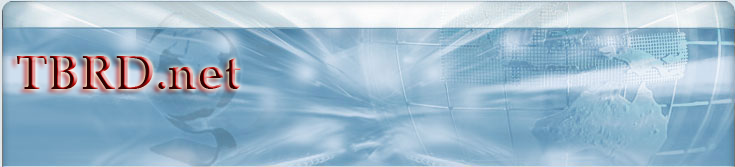
<style>
.page{position:relative;width:735px;height:167px}
.page>*{position:absolute;margin:0}
.t1{font:48px "VNI-Palatin-Bold"}
</style>
<div class="page">
<p class="t1" style="left:16px;top:56px;width:225px;height:33px">TBRD.net</p>
</div>
